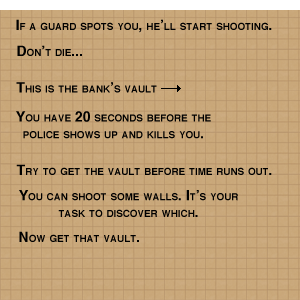
<style>
.page{position:relative;width:300px;height:300px}
.page>*{position:absolute;margin:0}
.t1{font:14px "Helvetica-Bold";color:#000000;font-variant:small-caps}
</style>
<div class="page">
<p class="t1" style="left:16px;top:19px;width:256px;height:14px">If a guard spots you, he’ll start shooting.</p>
<p class="t1" style="left:17px;top:45px;width:65px;height:11px">Don’t die...</p>
<p class="t1" style="left:16px;top:82px;width:141px;height:11px">This is the bank’s vault</p>
<p class="t1" style="left:16px;top:111px;width:195px;height:28px;text-align:center">You have 20 seconds before the<br>police shows up and kills you.</p>
<p class="t1" style="left:16px;top:164px;width:256px;height:11px">Try to get the vault before time runs out.</p>
<p class="t1" style="left:19px;top:190px;width:219px;height:27px;text-align:center">You can shoot some walls. It’s your<br>task to discover which.</p>
<p class="t1" style="left:19px;top:231px;width:120px;height:11px">Now get that vault.</p>
</div>
